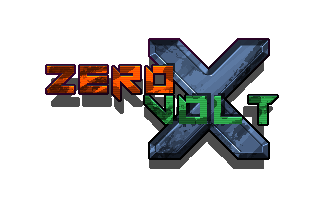
<style>
.page{position:relative;width:320px;height:200px;background:#ffffff}
.page>*{position:absolute;margin:0}
.t1{font:235.2px "Super-glue"}
.t2{font:53.4px "Super-glue"}
</style>
<div class="page">
<p class="t1" style="left:150px;top:40px;width:118px;height:118px">X</p>
<p class="t2" style="left:47px;top:66px;width:126px;height:34px">ZERO</p>
</div>
